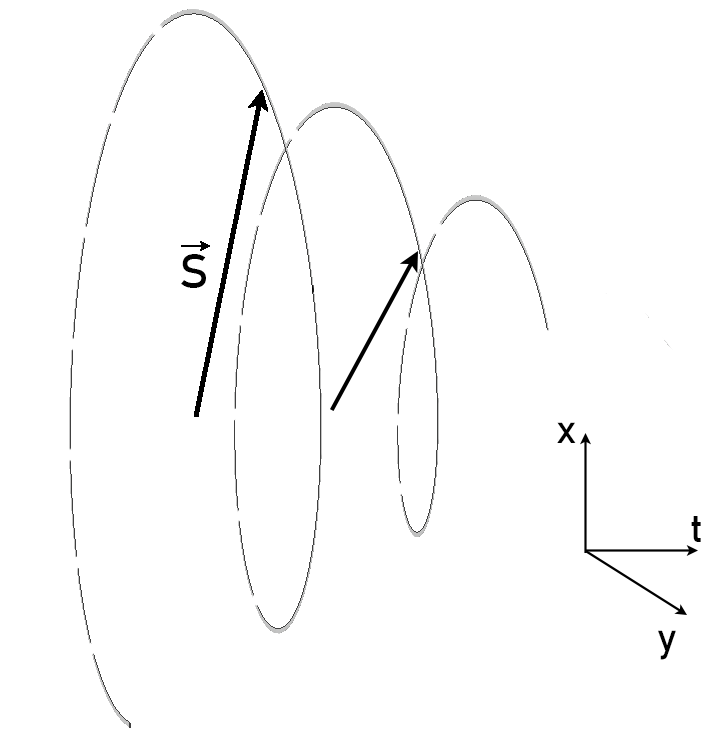
<style>
.page{position:relative;width:727px;height:735px;background:#ffffff}
.page>*{position:absolute;margin:0}
.t1{font:48px "Bahnschrift";color:#000000}
.t2{font:40px "Bahnschrift";color:#000000}
</style>
<div class="page">
<p class="t1" style="left:181px;top:254px;width:25px;height:34px">S</p>
<p class="t2" style="left:557px;top:422px;width:19px;height:21px">x</p>
<p class="t2" style="left:691px;top:516px;width:10px;height:26px">t</p>
<p class="t2" style="left:658px;top:630px;width:18px;height:30px">y</p>
</div>
